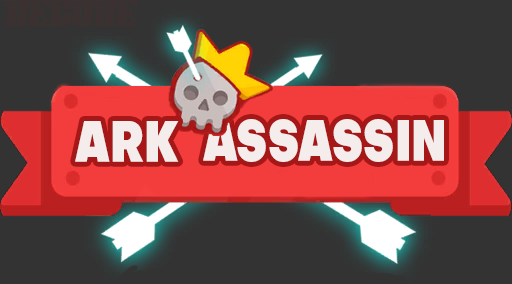
<style>
.page{position:relative;width:512px;height:284px;background:#333333}
.page>*{position:absolute;margin:0}
.t1{font:57.2px "Objectivity-Black";color:#f5ecec;scale:0.75 1}
</style>
<div class="page">
<p class="t1" style="left:75px;top:121px;width:104px;height:41px">ARK</p>
<p class="t1" style="left:203px;top:119px;width:241px;height:43px">ASSASSIN</p>
</div>
